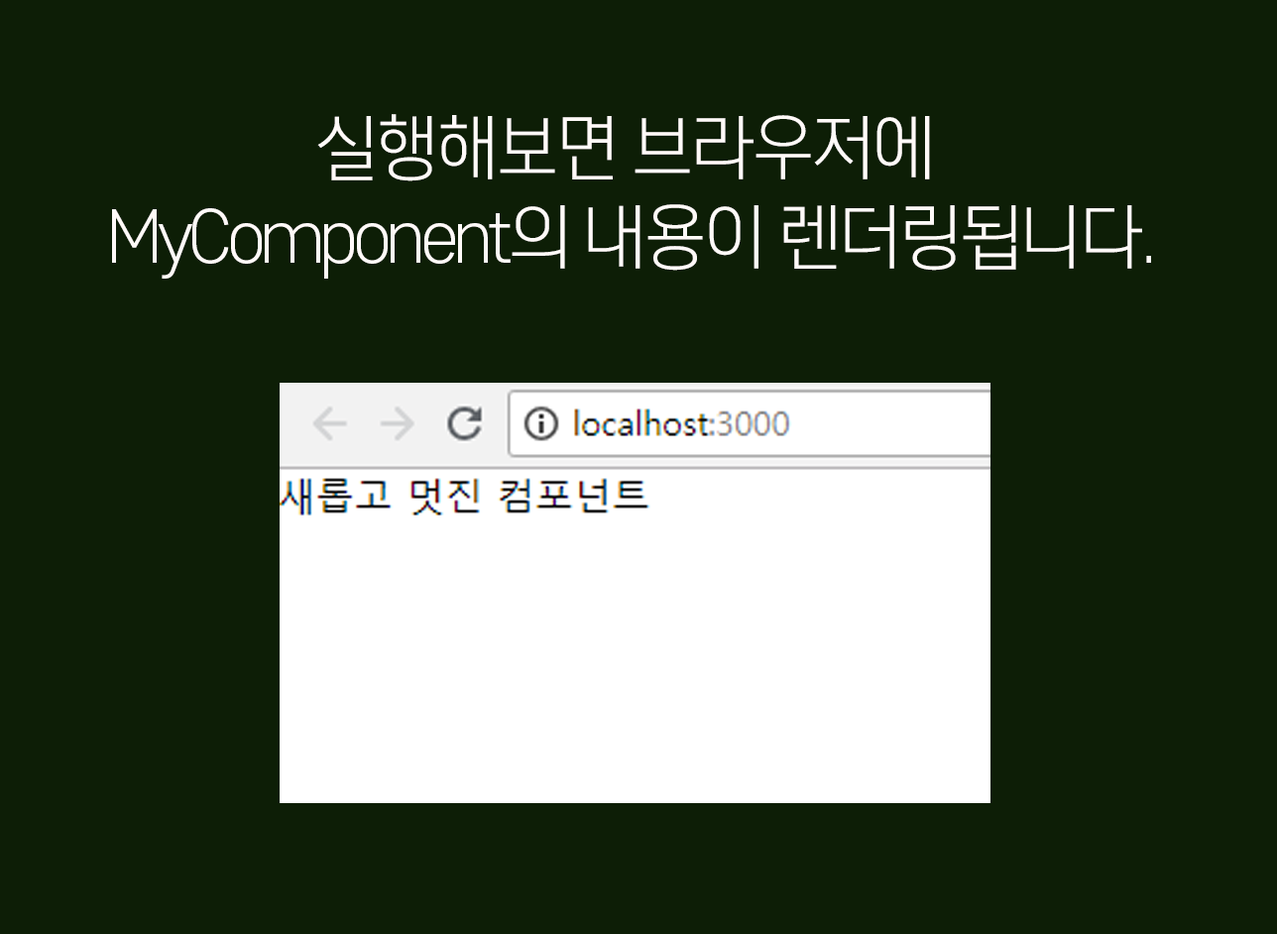
<style>
.page{position:relative;width:1277px;height:934px;background:#0d1e06}
.page>*{position:absolute;margin:0}
.t1{font:71.4px/89.2px "CoreGothicD-3Light";letter-spacing:-0.075em;color:#fffaf8}
</style>
<div class="page">
<p class="t1" style="left:112px;top:114px;width:1039px;height:165px;text-align:center">실행해보면 브라우저에 <br>MyComponent의 내용이 렌더링됩니다.</p>
</div>
